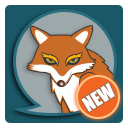
<style>
.page{position:relative;width:128px;height:128px}
.page>*{position:absolute;margin:0}
.t1{font:18.6px "Impact";color:#ffffff}
</style>
<div class="page">
<p class="t1" style="left:81px;top:82px;width:34px;height:30px;rotate:-32deg">NEW</p>
</div>
